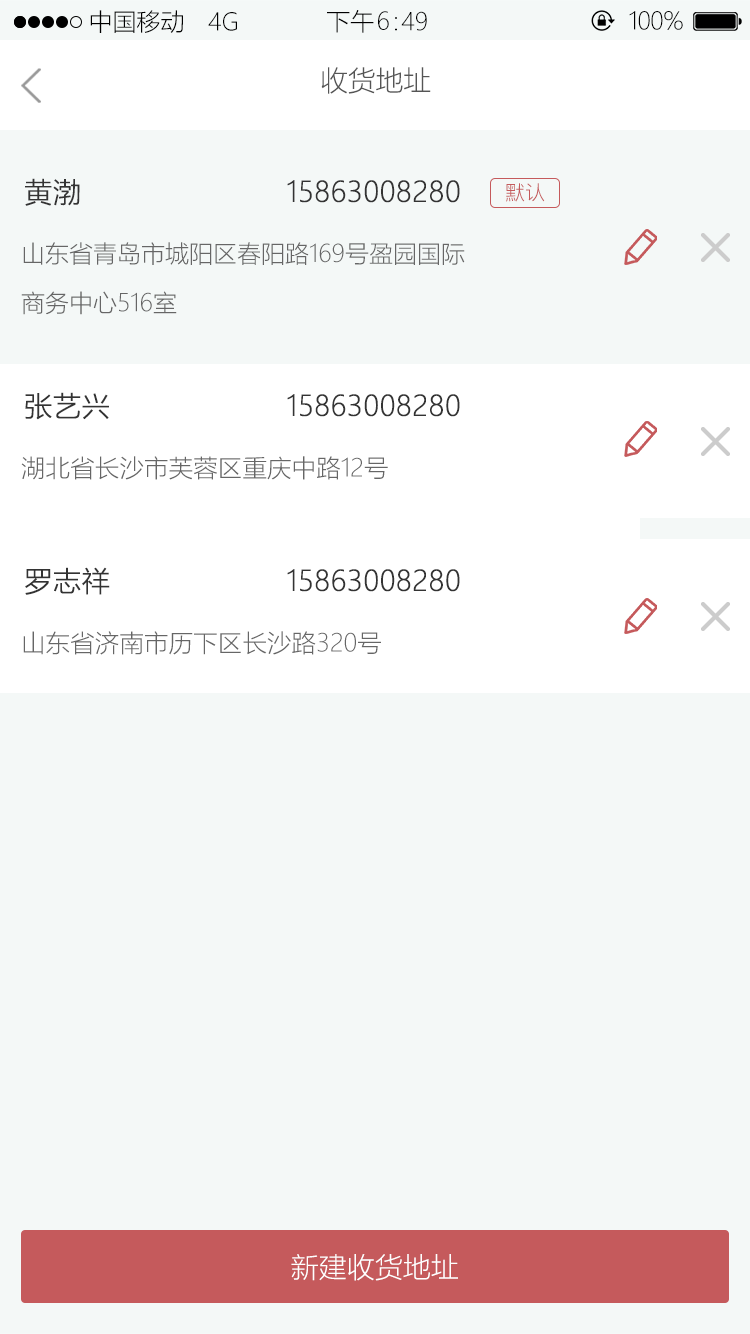
<style>
.page{position:relative;width:750px;height:1334px;background:#f4f8f7}
.page>*{position:absolute;margin:0}
.t1{font:24px "MicrosoftYaHeiUILight";color:#000000}
.t2{font:28px "MicrosoftYaHeiUILight";color:#555555}
.t3{font:28px "MicrosoftYaHeiUILight";color:#333333;font-weight:bold}
.t4{font:20px "PingFang-SC-Regular";color:#c55a5c}
.t5{font:24px/49.2px "MicrosoftYaHeiUILight";color:#666666}
.t6{font:24.6px "MicrosoftYaHeiUILight";color:#666666}
.t7{font:28px "MicrosoftYaHeiUILight";color:#ffffff}
</style>
<div class="page">
<p class="t1" style="left:90px;top:10px;width:93px;height:23px">中国移动</p>
<p class="t1" style="left:208px;top:12px;width:29px;height:19px">4G</p>
<p class="t1" style="left:327px;top:10px;width:47px;height:23px">下午</p>
<p class="t1" style="left:378px;top:11px;width:11px;height:19px">6</p>
<p class="t1" style="left:395px;top:17px;width:2px;height:14px">：</p>
<p class="t1" style="left:401px;top:11px;width:26px;height:20px">49</p>
<p class="t1" style="left:629px;top:11px;width:54px;height:19px">100%</p>
<p class="t2" style="left:321px;top:67px;width:110px;height:27px">收货地址</p>
<p class="t3" style="left:25px;top:178px;width:55px;height:28px">黄渤</p>
<p class="t3" style="left:287px;top:180px;width:173px;height:23px">15863008280</p>
<p class="t4" style="left:506px;top:183px;width:39px;height:19px">默认</p>
<p class="t5" style="left:21px;top:242px;width:444px;height:73px">山东省青岛市城阳区春阳路169号盈园国际商务中心516室</p>
<p class="t3" style="left:25px;top:392px;width:84px;height:28px">张艺兴</p>
<p class="t3" style="left:287px;top:394px;width:173px;height:23px">15863008280</p>
<p class="t6" style="left:21px;top:456px;width:367px;height:24px">湖北省长沙市芙蓉区重庆中路12号</p>
<p class="t3" style="left:25px;top:567px;width:85px;height:28px">罗志祥</p>
<p class="t3" style="left:287px;top:569px;width:173px;height:23px">15863008280</p>
<p class="t6" style="left:23px;top:631px;width:358px;height:24px">山东省济南市历下区长沙路320号</p>
<p class="t7" style="left:291px;top:1254px;width:167px;height:27px">新建收货地址</p>
</div>
